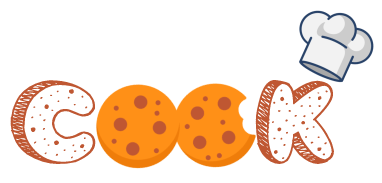
<style>
.page{position:relative;width:382px;height:183px;background:#ffffff}
.page>*{position:absolute;margin:0}
.t1{font:120px "CookieDough";color:#bf5732}
</style>
<div class="page">
<p class="t1" style="left:10px;top:79px;width:324px;height:85px">C     k</p>
</div>
